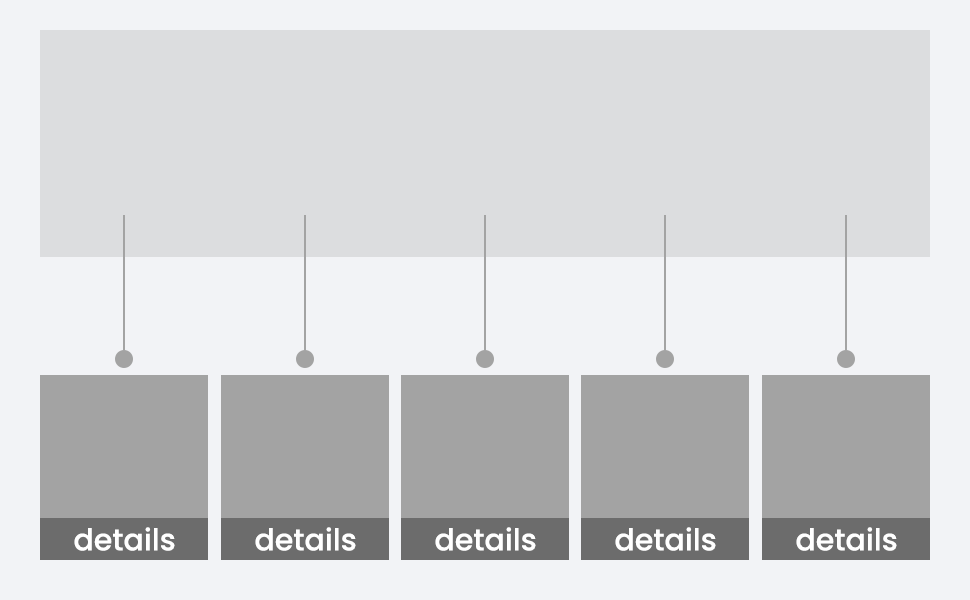
<style>
.page{position:relative;width:970px;height:600px;background:#f2f3f6}
.page>*{position:absolute;margin:0}
.t1{font:30px "Poppins-Medium";color:#ffffff}
</style>
<div class="page">
<p class="t1" style="left:74px;top:527px;width:101px;height:24px">details</p>
<p class="t1" style="left:255px;top:527px;width:101px;height:24px">details</p>
<p class="t1" style="left:435px;top:527px;width:101px;height:24px">details</p>
<p class="t1" style="left:615px;top:527px;width:101px;height:24px">details</p>
<p class="t1" style="left:796px;top:527px;width:101px;height:24px">details</p>
</div>
